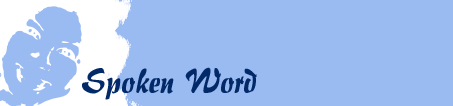
<style>
.page{position:relative;width:453px;height:106px;background:#9abbf1}
.page>*{position:absolute;margin:0}
.t1{font:36px "BrushFlair";color:#032a68}
</style>
<div class="page">
<p class="t1" style="left:82px;top:67px;width:175px;height:33px">Spoken Word</p>
</div>
